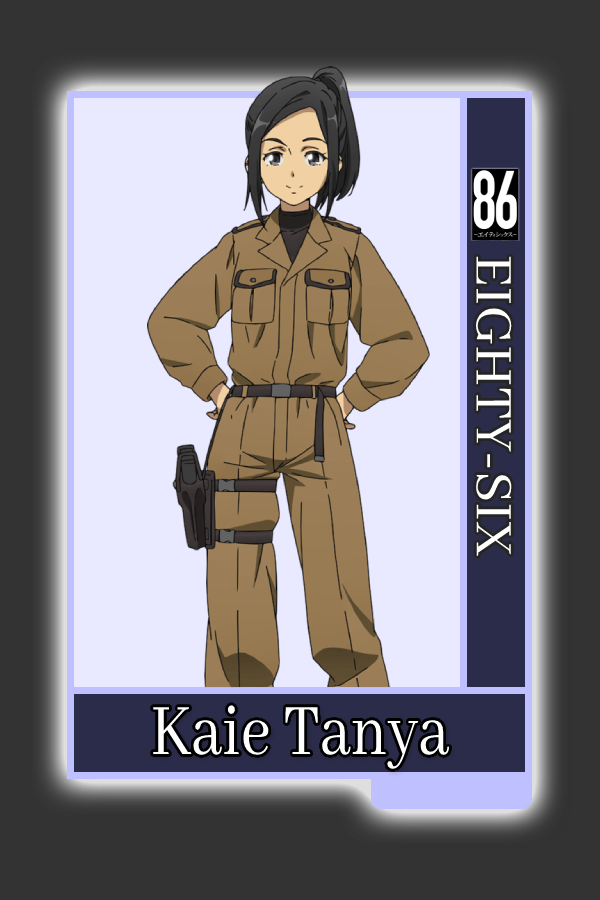
<style>
.page{position:relative;width:600px;height:900px;background:#e9e9ff}
.page>*{position:absolute;margin:0}
.t1{font:58.2px "AbhayaLibre-Regular";color:#ffffff}
.t2{font:79.6px "AbhayaLibre-Regular";color:#ffffff;scale:0.83 1}
</style>
<div class="page">
<p class="t1" style="left:476px;top:256px;width:36px;height:300px;rotate:90deg">EIGHTY-SIX</p>
<p class="t2" style="left:153px;top:705px;width:297px;height:64px">Kaie Tanya</p>
</div>
